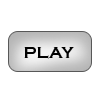
<style>
.page{position:relative;width:100px;height:100px;background:#ffffff}
.page>*{position:absolute;margin:0}
.t1{font:17px "CopperplateGothic-Bold";color:#020202}
</style>
<div class="page">
<p class="t1" style="left:24px;top:47px;width:50px;height:12px">PLAY</p>
</div>
